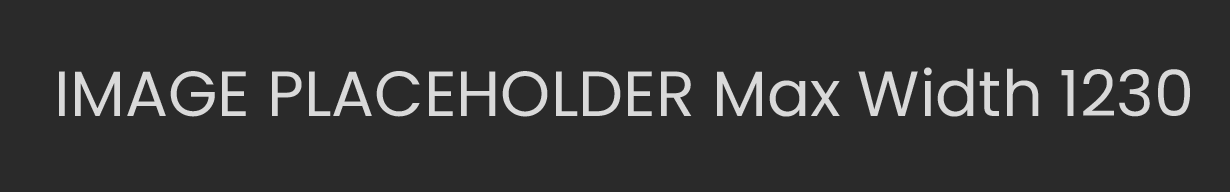
<style>
.page{position:relative;width:1230px;height:192px;background:#2a2a2a}
.page>*{position:absolute;margin:0}
.t1{font:63.8px "Poppins-Regular";color:#d9d9d9}
</style>
<div class="page">
<p class="t1" style="left:59px;top:67px;width:1131px;height:50px">IMAGE PLACEHOLDER Max Width 1230</p>
</div>
